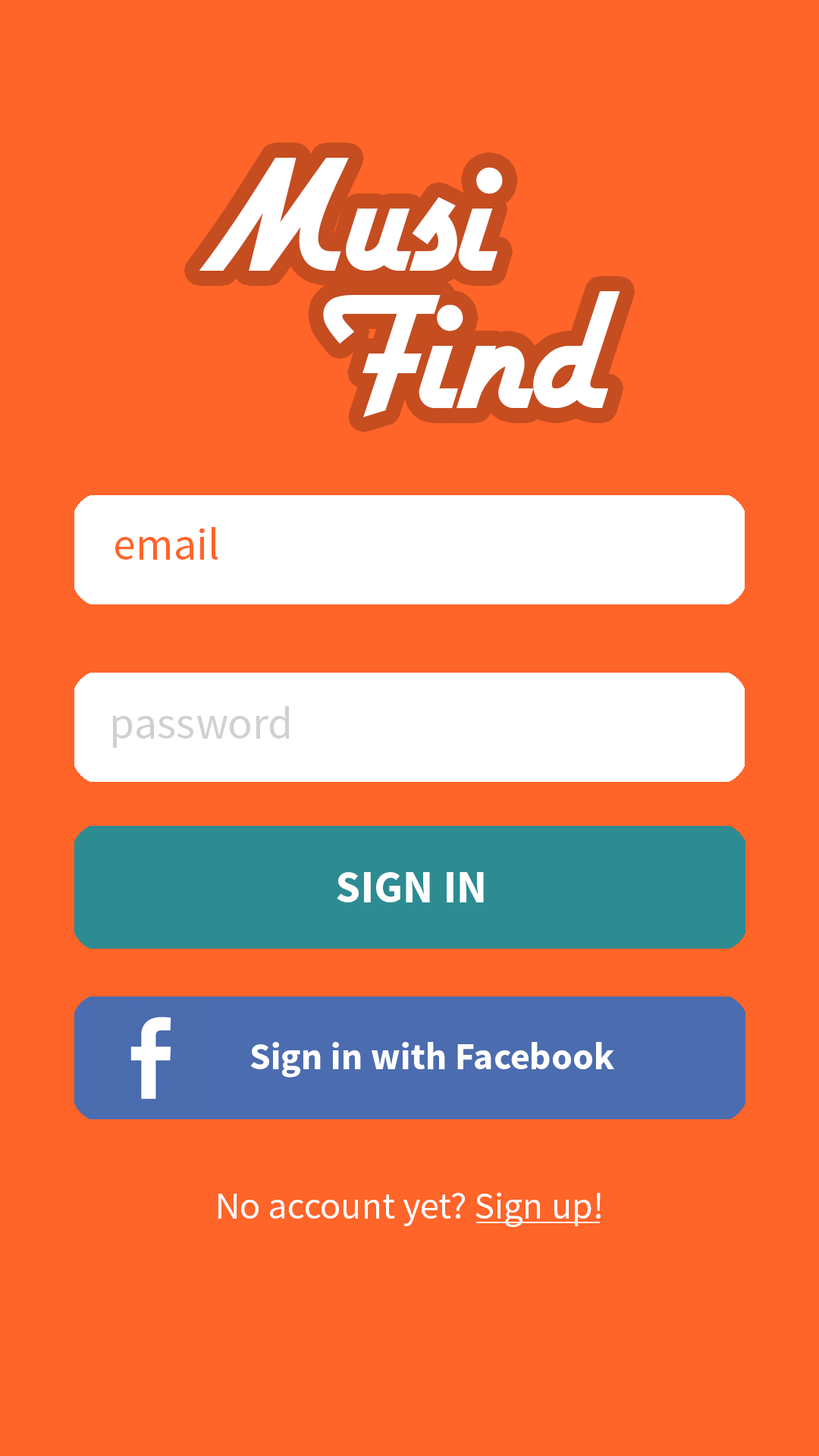
<style>
.page{position:relative;width:819px;height:1456px;background:#ff6429}
.page>*{position:absolute;margin:0}
.t1{font:189.6px "Airstream";color:#ffffff}
.t2{font:45.5px "SourceSansPro-Regular";color:#ff6429}
.t3{font:45.5px "SourceSansPro-Regular";color:#d3cfcf}
.t4{font:45.5px "SourceSansPro-Bold";color:#ffffff}
.t5{font:37.9px "SourceSansPro-Bold";color:#ffffff}
.t6{font:37.9px "SourceSansPro-Regular";color:#ffffff}
</style>
<div class="page">
<p class="t1" style="left:199px;top:158px;width:304px;height:113px">Musi</p>
<p class="t1" style="left:323px;top:291px;width:297px;height:126px">Find</p>
<p class="t2" style="left:115px;top:527px;width:103px;height:33px">email</p>
<p class="t3" style="left:113px;top:706px;width:176px;height:42px">password</p>
<p class="t4" style="left:337px;top:872px;width:147px;height:30px">SIGN IN</p>
<p class="t5" style="left:250px;top:1042px;width:364px;height:36px">Sign in with Facebook</p>
<p class="t6" style="left:218px;top:1192px;width:383px;height:35px">No account yet? Sign up!</p>
</div>
